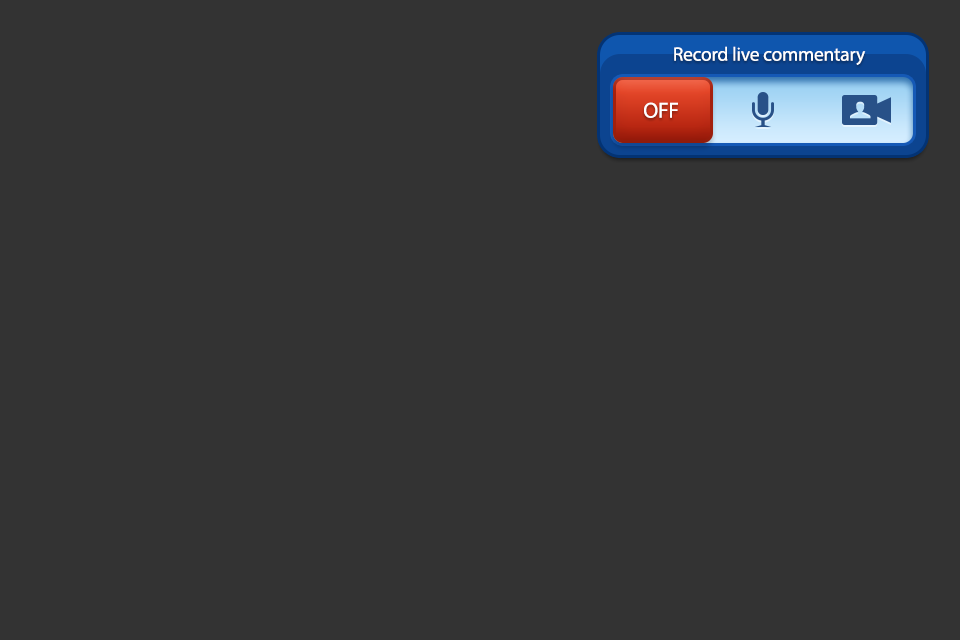
<style>
.page{position:relative;width:960px;height:640px;background:#333333}
.page>*{position:absolute;margin:0}
.t1{font:19.4px "MyriadPro-Regular";letter-spacing:-0.01em;color:#ffffff}
.t2{font:21.7px "MyriadPro-Regular";letter-spacing:-0.01em;color:#ffffff}
</style>
<div class="page">
<p class="t1" style="left:674px;top:46px;width:192px;height:19px">Record live commentary</p>
<p class="t2" style="left:644px;top:102px;width:34px;height:16px">OFF</p>
<p class="t2" style="left:644px;top:102px;width:34px;height:16px">OFF</p>
</div>
